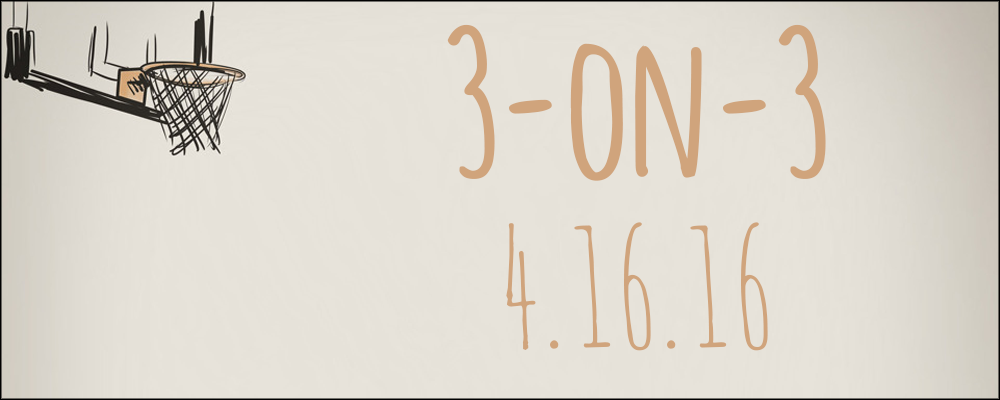
<style>
.page{position:relative;width:1000px;height:400px;background:#e6e2d9}
.page>*{position:absolute;margin:0}
.t1{font:198.1px "Amatic-Bold";color:#d0a47c}
.t2{font:164.5px "AmaticSC-Regular";color:#d0a47c}
</style>
<div class="page">
<p class="t1" style="left:447px;top:24px;width:379px;height:157px">3-on-3</p>
<p class="t2" style="left:506px;top:222px;width:262px;height:129px">4.16.16</p>
</div>
